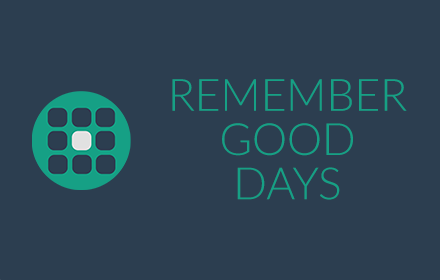
<style>
.page{position:relative;width:440px;height:280px;background:#2c3e50}
.page>*{position:absolute;margin:0}
.t1{font:44.2px/44.2px "Lato-Light";color:#16a085}
</style>
<div class="page">
<p class="t1" style="left:172px;top:79px;width:235px;height:121px;text-align:center">REMEMBER<br>GOOD<br>DAYS</p>
</div>
